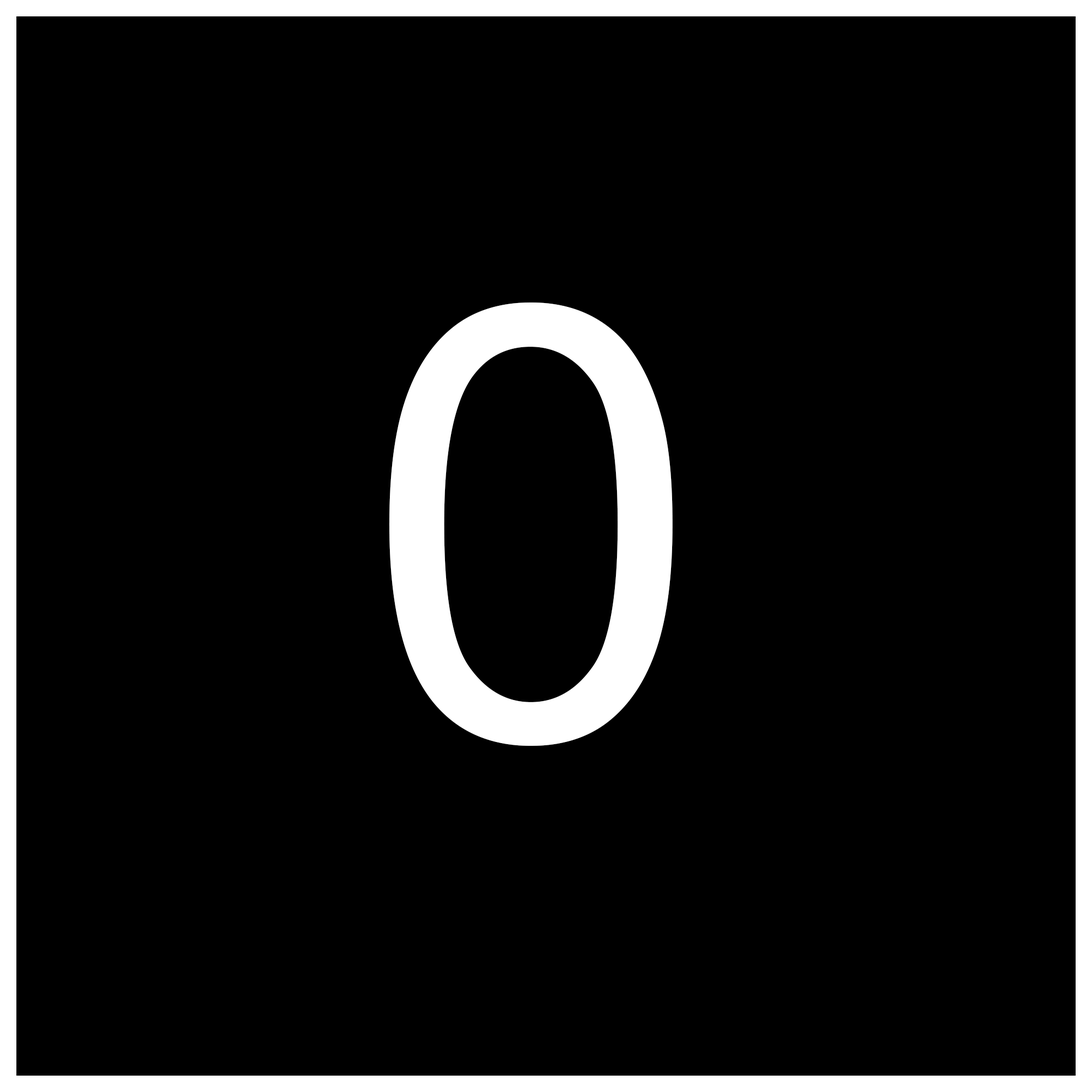
<style>
.page{position:relative;width:1092px;height:1092px;background:#000000}
.page>*{position:absolute;margin:0}
.t1{font:606.7px "ArialMT";color:#ffffff}
</style>
<div class="page">
<p class="t1" style="left:389px;top:302px;width:284px;height:444px">0</p>
</div>
